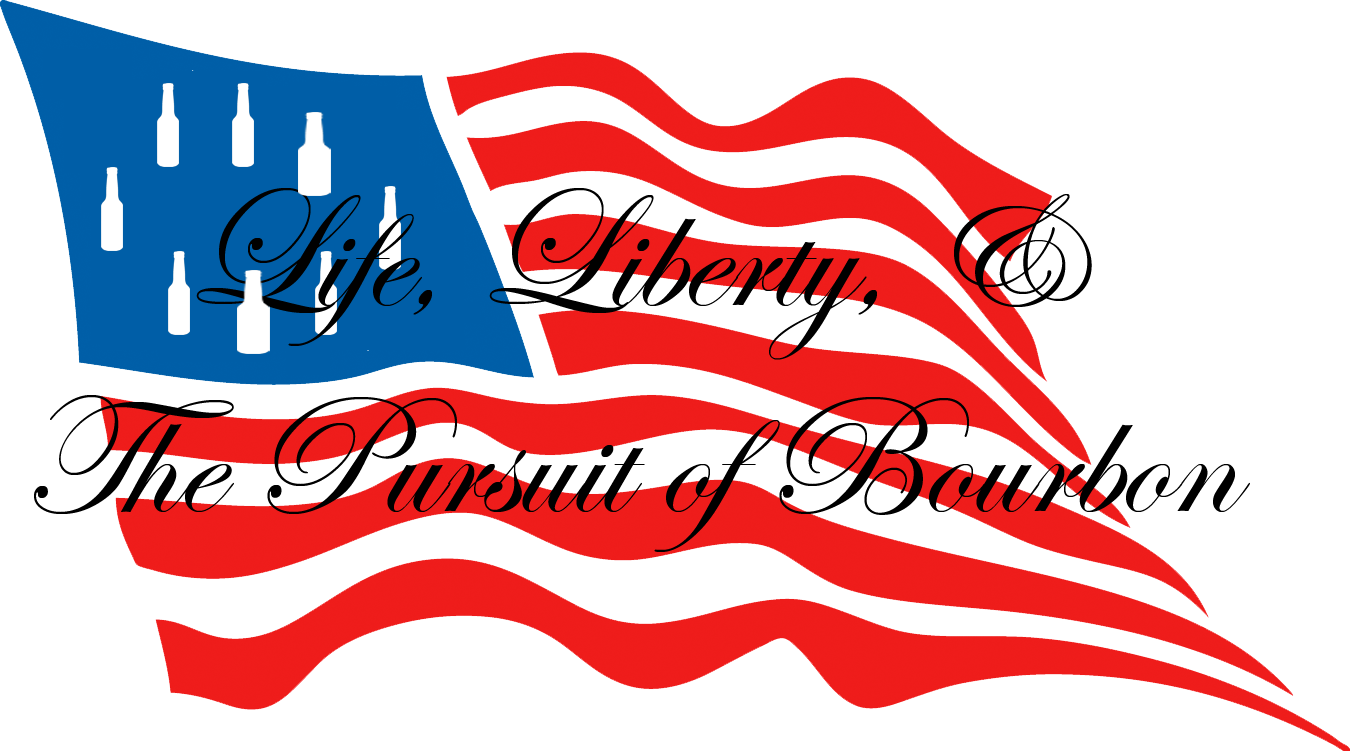
<style>
.page{position:relative;width:1350px;height:751px;background:#ffffff}
.page>*{position:absolute;margin:0}
.t1{font:172px "EdwardianScriptITC";color:#000000}
</style>
<div class="page">
<p class="t1" style="left:34px;top:188px;width:1216px;height:364px;text-align:center">Life, Liberty, &amp;<br>The Pursuit of Bourbon</p>
</div>
